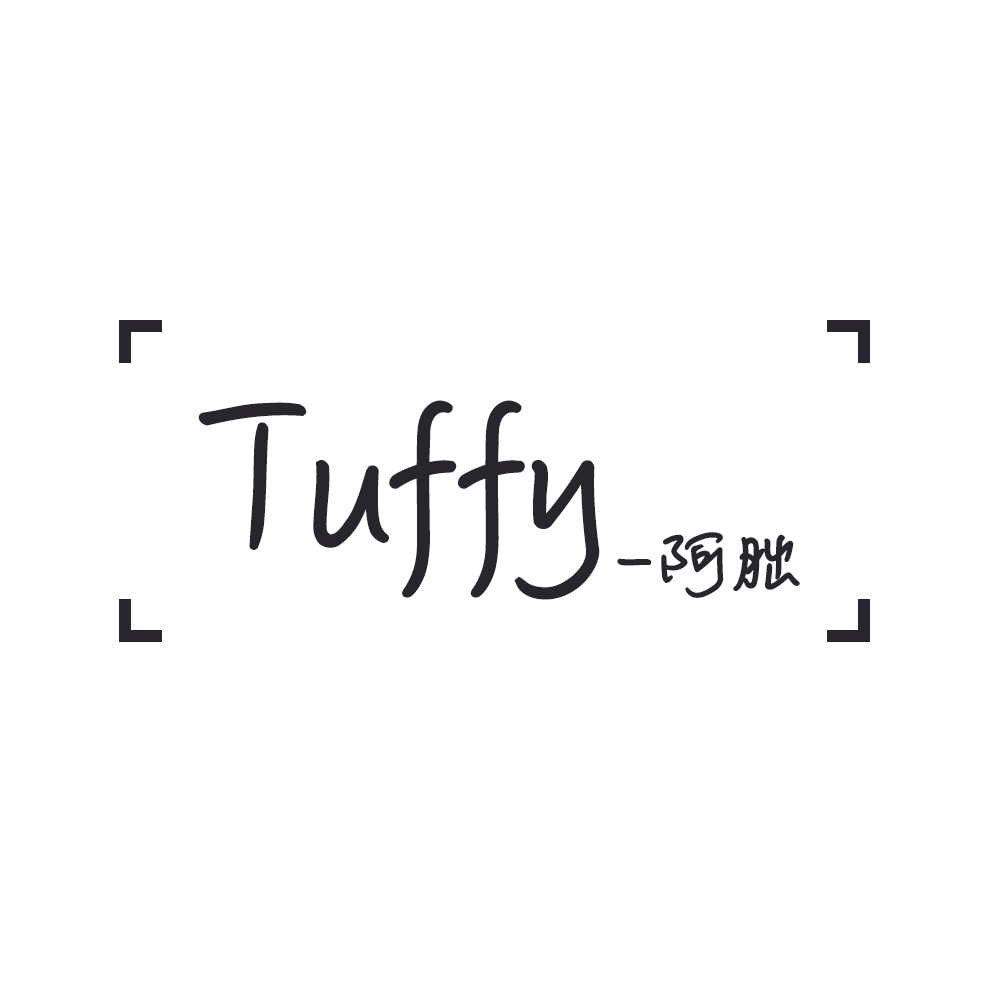
<style>
.page{position:relative;width:1000px;height:1000px;background:#ffffff}
.page>*{position:absolute;margin:0}
.t1{font:213.3px "MLingWaiMedium-SC";color:#28262c;font-weight:bold}
.t2{font:88.9px "MLingWaiMedium-SC";color:#28262c;font-weight:bold}
</style>
<div class="page">
<p class="t1" style="left:198px;top:400px;width:402px;height:200px">Tuffy</p>
<p class="t2" style="left:617px;top:532px;width:183px;height:66px">-阿胐</p>
</div>
